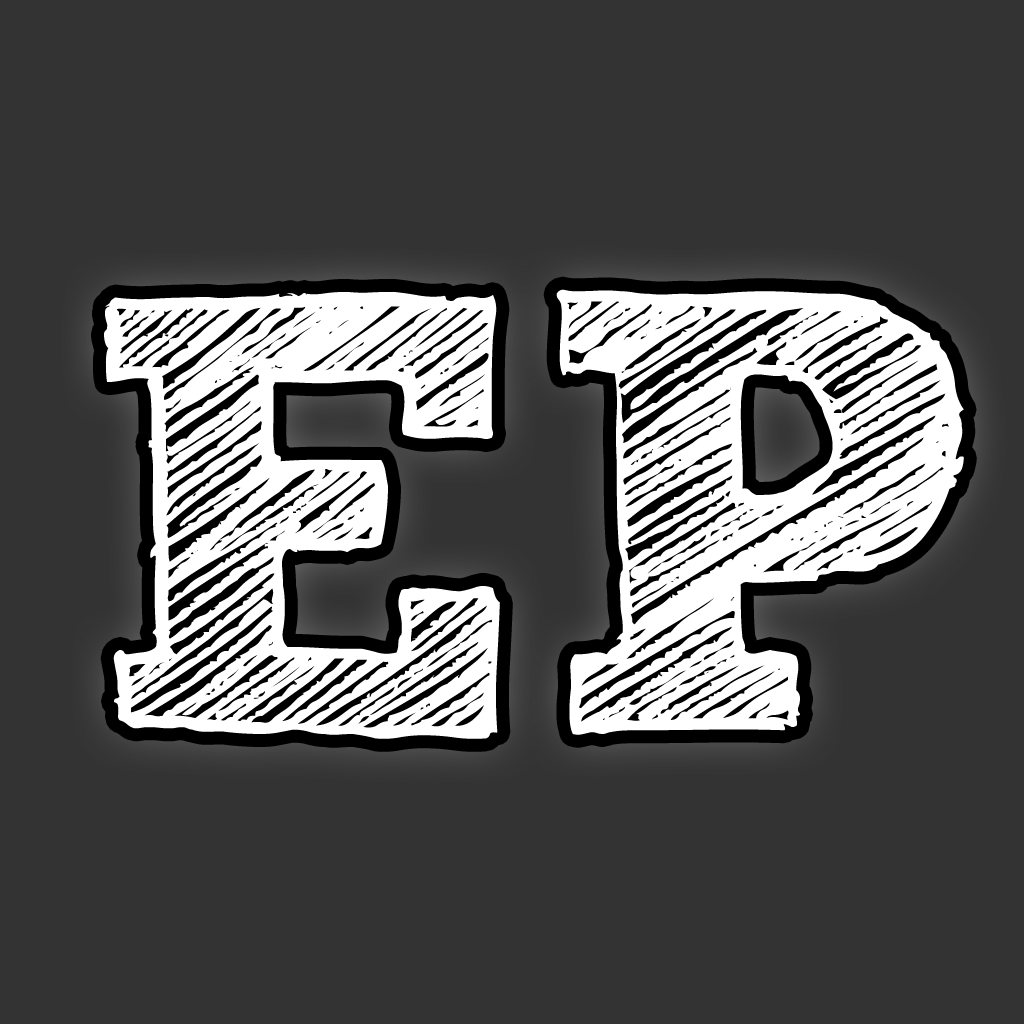
<style>
.page{position:relative;width:1024px;height:1024px;background:#333333}
.page>*{position:absolute;margin:0}
.t1{font:625px "freeversionSketchBlock-Bold";color:#ffffff}
</style>
<div class="page">
<p class="t1" style="left:104px;top:289px;width:860px;height:450px">EP</p>
</div>
